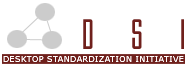
<style>
.page{position:relative;width:187px;height:67px;background:#ffffff}
.page>*{position:absolute;margin:0}
.t1{font:48px "GothamNightsNormal";letter-spacing:0.2em;color:#6f201c}
.t2{font:8px "Verdana";letter-spacing:0.05em;color:#ffffff}
</style>
<div class="page">
<p class="t1" style="left:83px;top:19px;width:101px;height:30px">D S I</p>
<p class="t2" style="left:3px;top:56px;width:181px;height:6px">DESKTOP STANDARDIZATION INITIATIVE</p>
</div>
